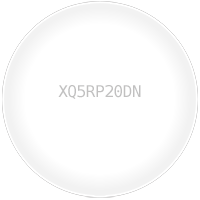
<style>
.page{position:relative;width:200px;height:200px;background:#ffffff}
.page>*{position:absolute;margin:0}
.t1{font:16px "BitstreamVeraSansMono-Roman";letter-spacing:-0.025em;color:#c1c0c0}
</style>
<div class="page">
<p class="t1" style="left:58px;top:85px;width:83px;height:14px">XQ5RP20DN</p>
</div>
